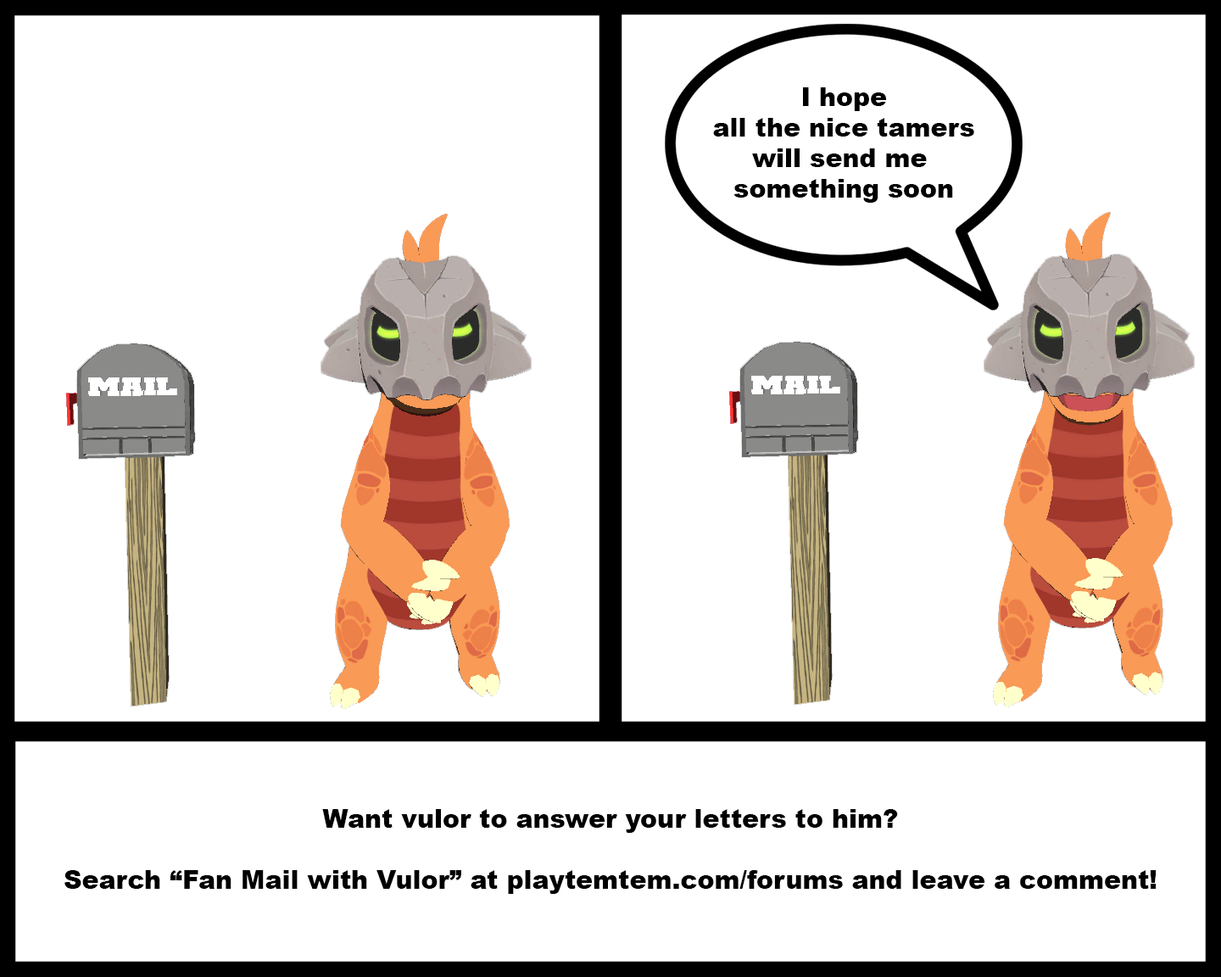
<style>
.page{position:relative;width:1221px;height:977px;background:#ffffff}
.page>*{position:absolute;margin:0}
.t1{font:25.4px "Arial-Black";color:#000000}
</style>
<div class="page">
<p class="t1" style="left:713px;top:87px;width:261px;height:116px;text-align:center">I hope<br>all the nice tamers<br>will send me <br>something soon</p>
<p class="t1" style="left:64px;top:809px;width:1092px;height:85px;text-align:center">Want vulor to answer your letters to him?<br><br>Search “Fan Mail with Vulor” at playtemtem.com/forums and leave a comment!</p>
</div>
